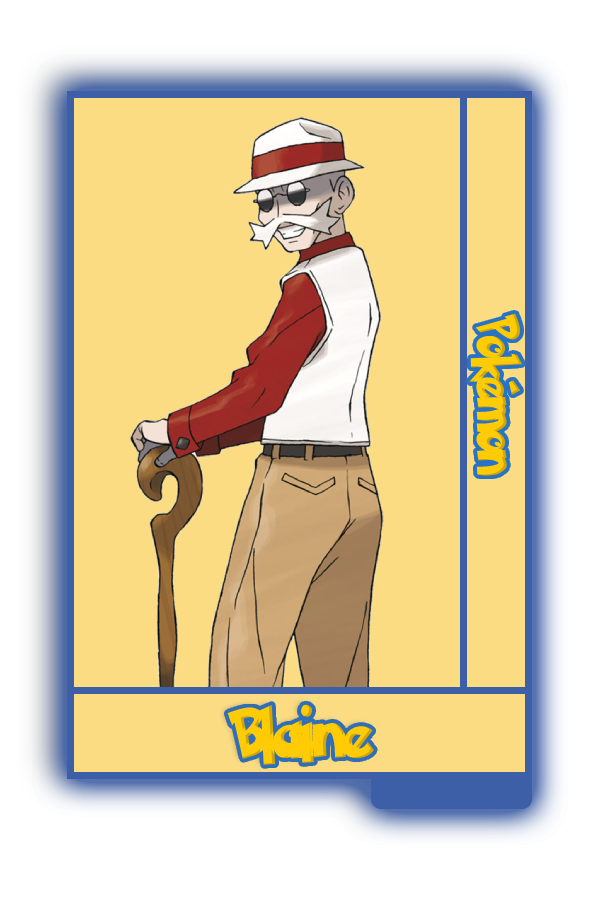
<style>
.page{position:relative;width:600px;height:900px;background:#fbdc83}
.page>*{position:absolute;margin:0}
.t1{font:48.8px "PokemonSolidNormal";color:#ffcb05;scale:0.8 1}
.t2{font:56.6px "PokemonSolidNormal";color:#ffcb05;scale:0.92 1}
</style>
<div class="page">
<p class="t1" style="left:469px;top:313px;width:54px;height:163px;rotate:90deg">Pokémon</p>
<p class="t2" style="left:227px;top:704px;width:147px;height:61px">Blaine</p>
</div>
